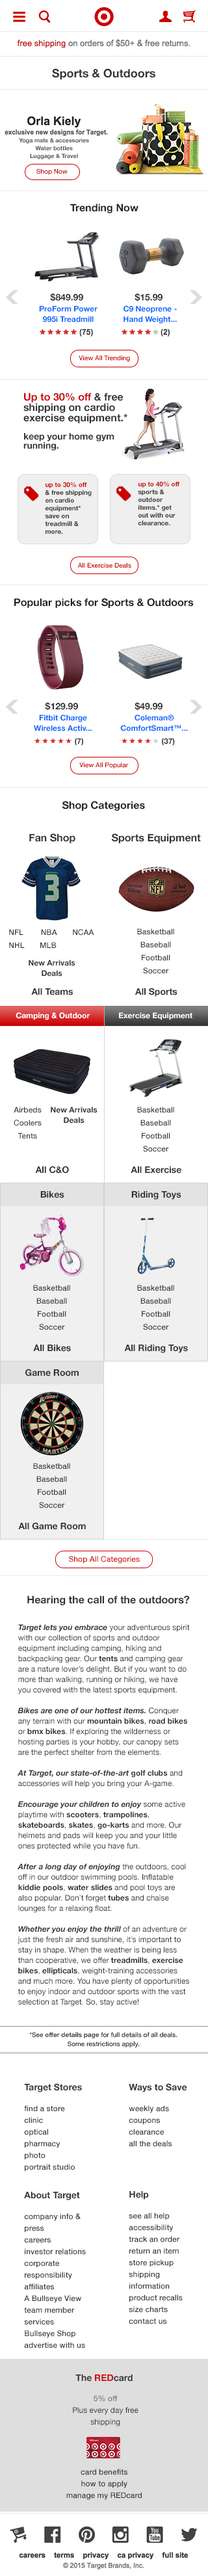
<style>
.page{position:relative;width:208px;height:2576px;background:#ffffff}
.page>*{position:absolute;margin:0}
.t1{font:11.7px "HelveticaNeue-Bold";color:#333333}
.t2{font:5.9px/7.8px "HelveticaNeue-Bold";color:#514e4b}
.t3{font:6.5px "HelveticaNeue-Medium";color:#cc0000}
.t4{font:10.4px "HelveticaNeue-Bold";color:#222222}
.t5{font:9.1px "HelveticaNeue-Bold";color:#333333}
.t6{font:7.8px/10.4px "HelveticaNeue-Bold";color:#0666ff}
.t7{font:10.4px/10.4px "HelveticaNeue-Bold";color:#333333}
.t8{font:10.4px/10.4px "HelveticaNeue-Bold";color:#cc0000}
.t9{font:9.1px/9.1px "HelveticaNeue-Bold";color:#333333}
.t10{font:6.5px/7.8px "HelveticaNeue-Bold";color:#333333}
.t11{font:6.5px/7.8px "HelveticaNeue-Bold";color:#cc0000}
.t12{font:7.8px "HelveticaNeue-Bold";color:#333333}
.t13{font:10.4px "HelveticaNeue-Bold";color:#333333}
.t14{font:7.8px "HelveticaNeue-Medium";color:#333333}
.t15{font:7.8px/13px "HelveticaNeue-Medium";color:#333333}
.t16{font:7.8px/10.4px "HelveticaNeue-Bold";color:#333333}
.t17{font:7.8px "HelveticaNeue-Bold";color:#ffffff}
.t18{font:7.8px "HelveticaNeue-Medium";color:#cc0000}
.t19{font:7.8px/10.4px "HelveticaNeue";color:#333333}
.t20{font:7.8px/10.4px "HelveticaNeue-BoldItalic";color:#333333}
.t21{font:6.5px/9.1px "HelveticaNeue-Medium";color:#333333}
.t22{font:6.5px/9.1px "HelveticaNeue-Bold";color:#333333}
.t23{font:7.8px/11.7px "HelveticaNeue-Medium";color:#333333}
.t24{font:9.1px "HelveticaNeue-Bold";color:#cc0000}
.t25{font:7.8px/11.7px "HelveticaNeue";color:#333333}
.t26{font:7.8px/11.7px "HelveticaNeue-Medium";color:#757474}
</style>
<div class="page">
<p class="t1" style="left:52px;top:68px;width:103px;height:12px">Sports &amp; Outdoors</p>
<p class="t2" style="left:19px;top:138px;width:70px;height:21px;text-align:center">Yoga mats &amp; accessories<br>Water bottles<br>Luggage &amp; Travel</p>
<p class="t3" style="left:36px;top:168px;width:32px;height:7px">Shop Now</p>
<p class="t4" style="left:70px;top:204px;width:68px;height:9px">Trending Now</p>
<p class="t5" style="left:50px;top:293px;width:33px;height:9px">$849.99</p>
<p class="t5" style="left:135px;top:293px;width:28px;height:9px">$15.99</p>
<p class="t6" style="left:39px;top:306px;width:59px;height:16px;text-align:center">ProForm Power 995i Treadmill</p>
<p class="t6" style="left:124px;top:306px;width:53px;height:18px;text-align:center">C9 Neoprene - Hand Weight...</p>
<p class="t3" style="left:79px;top:355px;width:51px;height:6px">View All Trending</p>
<p class="t7" style="left:23px;top:393px;width:104px;height:58px"><span class="t8">Up to 30% off</span> &amp; free shipping on cardio exercise equipment.*<br><span class="t9"><br>keep your home gym running.</span></p>
<p class="t10" style="left:45px;top:482px;width:47px;height:52px"><span class="t11">up to 30% off </span>&amp; free shipping on cardio equipment* save on treadmill &amp; more.</p>
<p class="t10" style="left:138px;top:481px;width:41px;height:45px"><span class="t11">up to 40% off </span>sports &amp; outdoor items.* get out with our clearance.</p>
<p class="t3" style="left:77px;top:562px;width:54px;height:6px">All Exercise Deals</p>
<p class="t4" style="left:14px;top:598px;width:180px;height:10px">Popular picks for Sports &amp; Outdoors</p>
<p class="t5" style="left:45px;top:702px;width:33px;height:9px">$129.99</p>
<p class="t5" style="left:135px;top:702px;width:28px;height:9px">$49.99</p>
<p class="t6" style="left:34px;top:715px;width:58px;height:16px;text-align:center">Fitbit Charge Wireless Activ...</p>
<p class="t6" style="left:120px;top:715px;width:68px;height:16px;text-align:center">Coleman® ComfortSmart™...</p>
<p class="t12" style="left:75px;top:738px;width:8px;height:8px">(7)</p>
<p class="t12" style="left:162px;top:738px;width:13px;height:8px">(37)</p>
<p class="t3" style="left:79px;top:762px;width:50px;height:7px">View All Popular</p>
<p class="t4" style="left:62px;top:801px;width:83px;height:10px">Shop Categories</p>
<p class="t13" style="left:29px;top:834px;width:46px;height:9px">Fan Shop</p>
<p class="t13" style="left:111px;top:834px;width:90px;height:9px">Sports Equipment</p>
<p class="t14" style="left:9px;top:929px;width:85px;height:7px">NFL        NBA       NCAA</p>
<p class="t15" style="left:137px;top:928px;width:37px;height:46px;text-align:center">Basketball<br>Baseball<br>Football<br>Soccer</p>
<p class="t14" style="left:9px;top:942px;width:48px;height:6px">NHL       MLB</p>
<p class="t16" style="left:29px;top:960px;width:46px;height:17px;text-align:center">New Arrivals<br>Deals</p>
<p class="t5" style="left:31px;top:988px;width:42px;height:7px">All Teams</p>
<p class="t5" style="left:135px;top:988px;width:42px;height:9px">All Sports</p>
<p class="t17" style="left:16px;top:1012px;width:74px;height:8px">Camping &amp; Outdoor</p>
<p class="t17" style="left:119px;top:1012px;width:73px;height:8px">Exercise Equipment</p>
<p class="t15" style="left:14px;top:1107px;width:28px;height:32px;text-align:center">Airbeds<br>Coolers<br>Tents</p>
<p class="t16" style="left:51px;top:1107px;width:47px;height:17px;text-align:center">New Arrivals<br>Deals</p>
<p class="t15" style="left:137px;top:1107px;width:37px;height:45px;text-align:center">Basketball<br>Baseball<br>Football<br>Soccer</p>
<p class="t5" style="left:35px;top:1166px;width:34px;height:8px">All C&amp;O</p>
<p class="t5" style="left:131px;top:1166px;width:50px;height:8px">All Exercise</p>
<p class="t5" style="left:40px;top:1191px;width:24px;height:7px">Bikes</p>
<p class="t5" style="left:131px;top:1191px;width:50px;height:9px">Riding Toys</p>
<p class="t15" style="left:33px;top:1285px;width:37px;height:45px;text-align:center">Basketball<br>Baseball<br>Football<br>Soccer</p>
<p class="t15" style="left:137px;top:1285px;width:37px;height:45px;text-align:center">Basketball<br>Baseball<br>Football<br>Soccer</p>
<p class="t5" style="left:33px;top:1345px;width:38px;height:7px">All Bikes</p>
<p class="t5" style="left:124px;top:1345px;width:64px;height:8px">All Riding Toys</p>
<p class="t5" style="left:25px;top:1369px;width:54px;height:7px">Game Room</p>
<p class="t15" style="left:33px;top:1463px;width:37px;height:45px;text-align:center">Basketball<br>Baseball<br>Football<br>Soccer</p>
<p class="t5" style="left:18px;top:1522px;width:68px;height:8px">All Game Room</p>
<p class="t18" style="left:69px;top:1556px;width:71px;height:8px">Shop All Categories</p>
<p class="t13" style="left:27px;top:1596px;width:163px;height:9px">Hearing the call of the outdoors?</p>
<p class="t19" style="left:17px;top:1624px;width:173px;height:382px"><span class="t20">Target lets you embrace</span> your adventurous spirit with our collection of sports and outdoor equipment including camping, hiking and backpacking gear. Our <span class="t16">tents</span> and camping gear are a nature lover’s delight. But if you want to do more than walking, running or hiking, we have you covered with the latest sports equipment.<br><br><span class="t20">Bikes are one of our hottest items.</span> Conquer any terrain with our <span class="t16">mountain bikes</span>, <span class="t16">road bikes</span> or <span class="t16">bmx bikes</span>. If exploring the wilderness or hosting parties is your hobby, our canopy sets are the perfect shelter from the elements. <br><br><span class="t20">At Target, our state-of-the-art </span><span class="t16">golf clubs</span> and accessories will help you bring your A-game. <br><br><span class="t20">Encourage your children to enjoy</span> some active playtime with <span class="t16">scooters</span>, <span class="t16">trampolines</span>, <span class="t16">skateboards</span>, <span class="t16">skates</span>, <span class="t16">go-karts</span> and more. Our helmets and pads will keep you and your little ones protected while you have fun. <br><br><span class="t20">After a long day of enjoying</span> the outdoors, cool off in our outdoor swimming pools. Inflatable <span class="t16">kiddie pools</span>, <span class="t16">water slides</span> and pool toys are also popular. Don’t forget <span class="t16">tubes</span> and chaise lounges for a relaxing float. <br><br><span class="t20">Whether you enjoy the thrill</span> of an adventure or just the fresh air and sunshine, it’s important to stay in shape. When the weather is being less than cooperative, we offer <span class="t16">treadmills</span>, <span class="t16">exercise bikes</span>, <span class="t16">ellipticals</span>, weight-training accessories and much more. You have plenty of opportunities to enjoy indoor and outdoor sports with the vast selection at Target. So, stay active!</p>
<p class="t21" style="left:29px;top:2032px;width:148px;height:15px;text-align:center">*See <span class="t22">offer details page</span> for full details of all deals. Some restrictions apply.</p>
<p class="t5" style="left:24px;top:2083px;width:58px;height:9px">Target Stores</p>
<p class="t5" style="left:129px;top:2083px;width:58px;height:9px">Ways to Save</p>
<p class="t23" style="left:24px;top:2105px;width:51px;height:67px">find a store<br>clinic<br>optical<br>pharmacy<br>photo<br>portrait studio</p>
<p class="t23" style="left:129px;top:2105px;width:43px;height:42px">weekly ads<br>coupons<br>clearance<br>all the deals</p>
<p class="t5" style="left:24px;top:2192px;width:56px;height:8px">About Target</p>
<p class="t5" style="left:129px;top:2191px;width:20px;height:9px">Help</p>
<p class="t23" style="left:24px;top:2213px;width:62px;height:135px">company info &amp; press<br>careers<br>investor relations<br>corporate responsibility<br>affiliates<br>A Bullseye View<br>team member services<br>Bullseye Shop<br>advertise with us</p>
<p class="t23" style="left:129px;top:2213px;width:54px;height:111px">see all help<br>accessibility<br>track an order<br>return an item<br>store pickup<br>shipping information<br>product recalls<br>size charts<br>contact us</p>
<p class="t5" style="left:75px;top:2374px;width:58px;height:8px">The <span class="t24">RED</span>card</p>
<p class="t25" style="left:73px;top:2395px;width:65px;height:31px;text-align:center"><span class="t26">5% off<br></span>Plus every day free shipping</p>
<p class="t23" style="left:66px;top:2469px;width:76px;height:31px;text-align:center">card benefits<br>how to apply<br>manage my REDcard</p>
</div>
